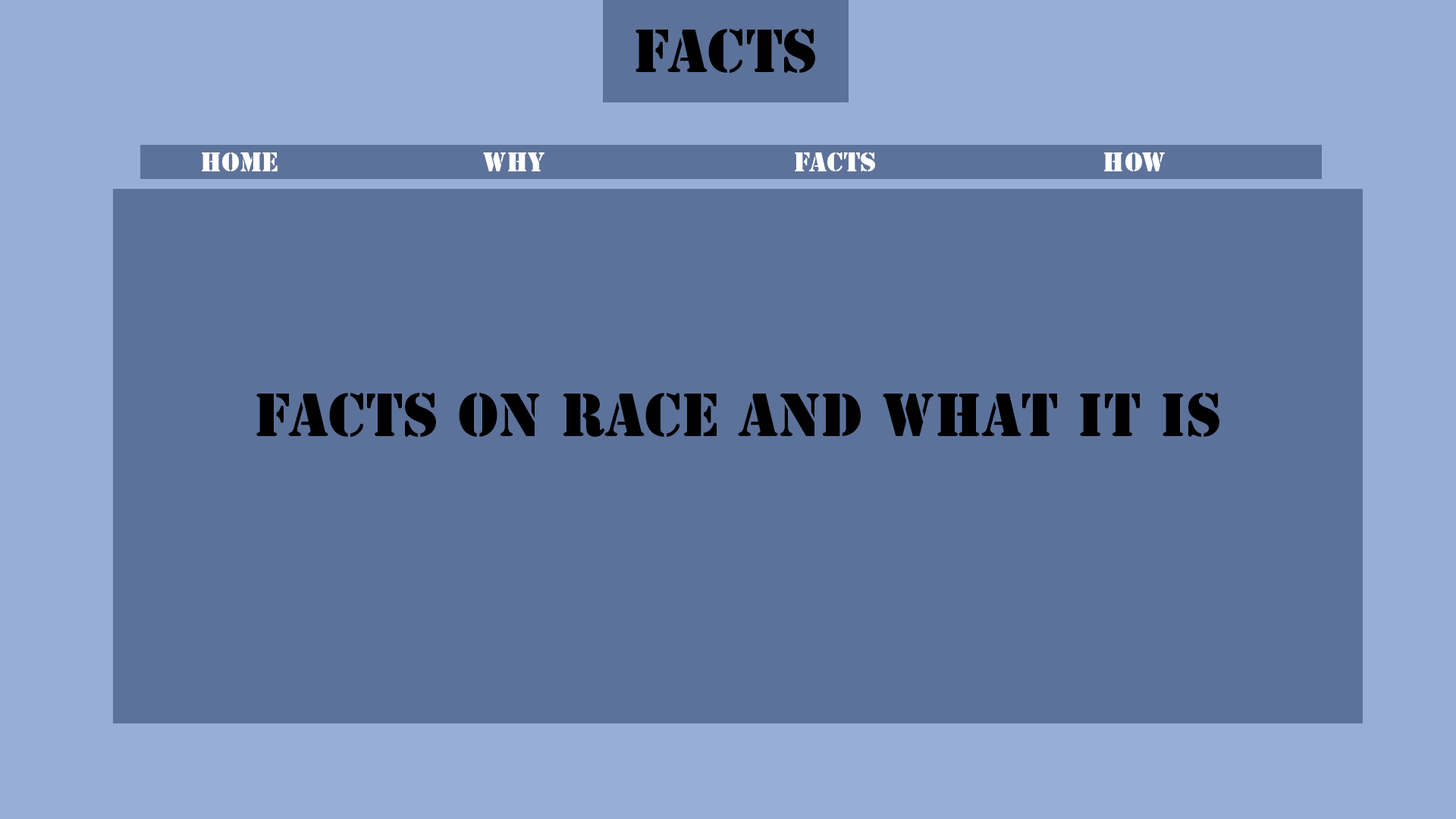
<style>
.page{position:relative;width:1456px;height:819px;background:#5d729a}
.page>*{position:absolute;margin:0}
.t1{font:56.9px "StencilStd";color:#000000}
.t2{font:25.3px "StencilStd";color:#ffffff}
</style>
<div class="page">
<p class="t1" style="left:635px;top:29px;width:180px;height:44px">Facts</p>
<p class="t2" style="left:202px;top:152px;width:76px;height:19px">Home</p>
<p class="t2" style="left:483px;top:152px;width:61px;height:19px">Why</p>
<p class="t2" style="left:795px;top:152px;width:80px;height:19px">Facts</p>
<p class="t2" style="left:1104px;top:152px;width:61px;height:19px">How</p>
<p class="t1" style="left:256px;top:393px;width:963px;height:44px">Facts on race and WHat it is</p>
</div>
